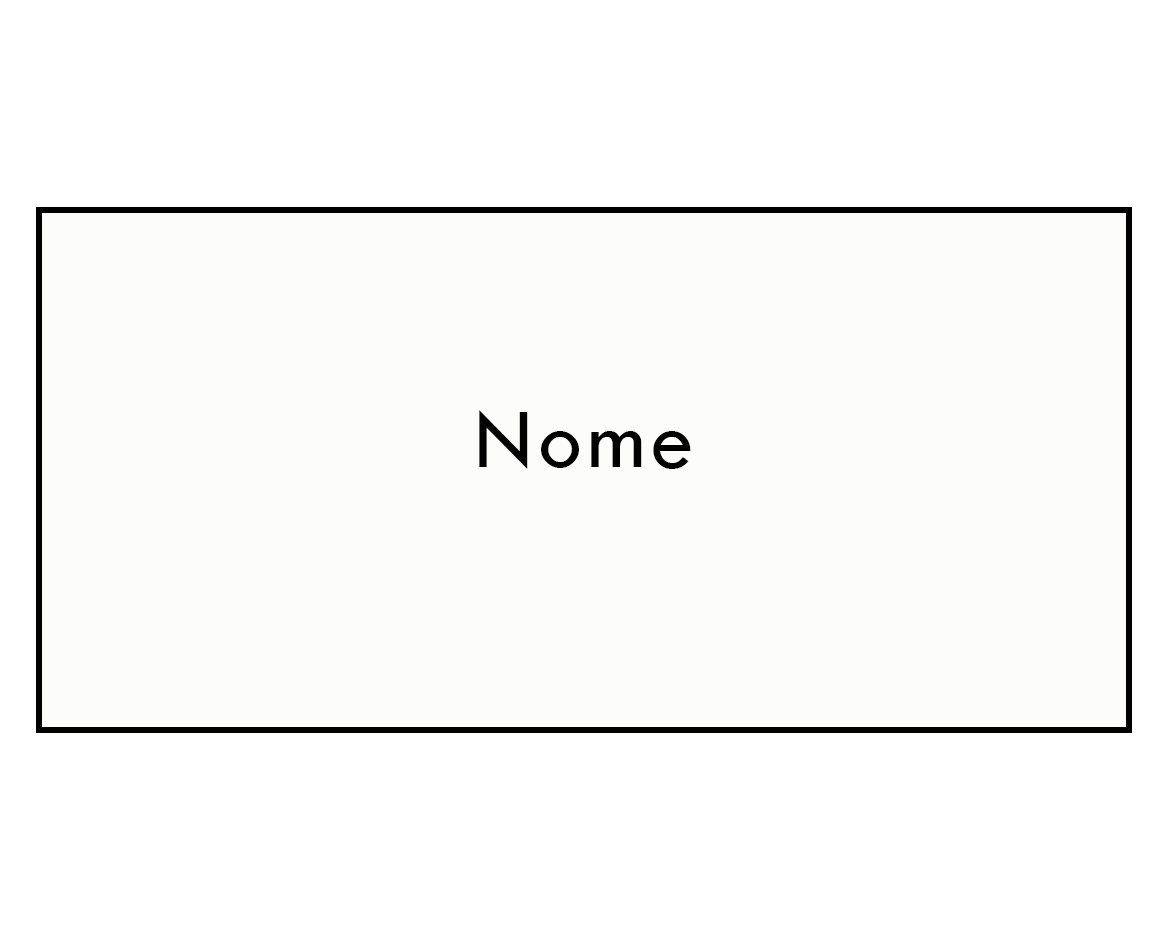
<style>
.page{position:relative;width:1173px;height:938px;background:#fcfcfb}
.page>*{position:absolute;margin:0}
.t1{font:87.5px "TwCenMT-Regular";letter-spacing:0.06em;color:#020202}
</style>
<div class="page">
<p class="t1" style="left:479px;top:410px;width:212px;height:59px">Nome</p>
</div>
